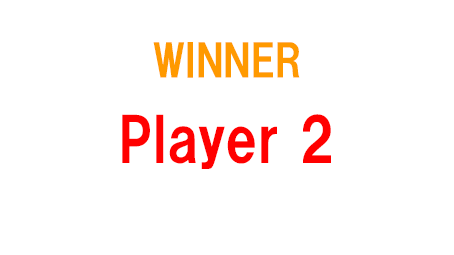
<style>
.page{position:relative;width:454px;height:255px;background:#ffffff}
.page>*{position:absolute;margin:0}
.t1{font:44px "HGSSoeiKakugothicUB";color:#ff9900}
.t2{font:60px "HGSSoeiKakugothicUB";color:#ff0000}
</style>
<div class="page">
<p class="t1" style="left:153px;top:42px;width:147px;height:36px">WINNER</p>
<p class="t2" style="left:122px;top:114px;width:209px;height:55px">Player 2</p>
</div>
